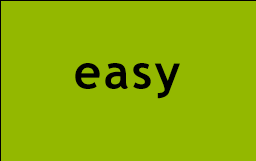
<style>
.page{position:relative;width:256px;height:161px;background:#93b800}
.page>*{position:absolute;margin:0}
.t1{font:48px "TrebuchetMS-Bold";letter-spacing:0.05em;color:#000000}
</style>
<div class="page">
<p class="t1" style="left:75px;top:63px;width:105px;height:36px">easy</p>
</div>
